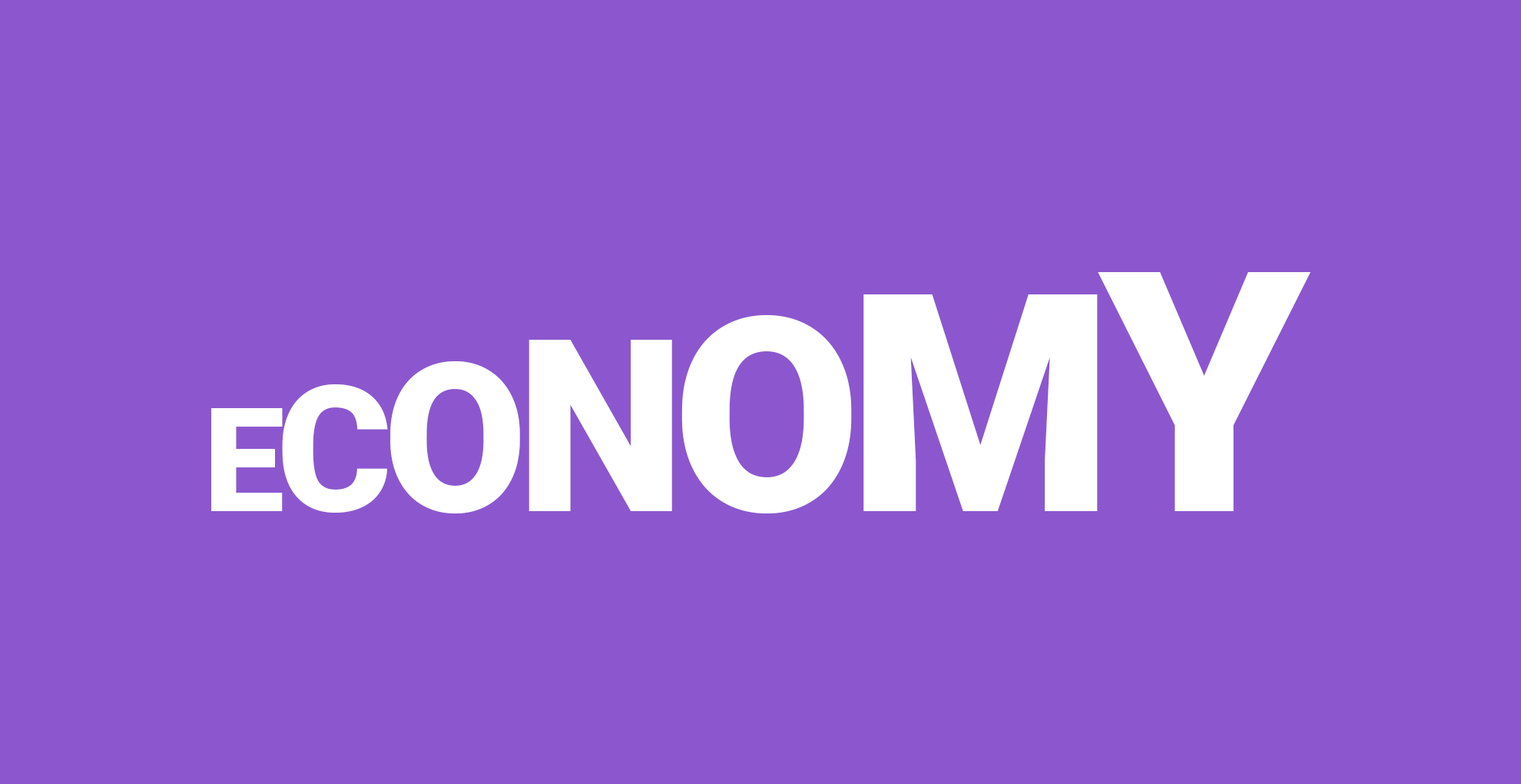
<style>
.page{position:relative;width:1521px;height:784px;background:#8c57ce}
.page>*{position:absolute;margin:0}
.t1{font:144.1px "Roboto-Black";letter-spacing:-0.05em;color:#ffffff}
.t2{font:176.1px "Roboto-Black";letter-spacing:-0.05em;color:#ffffff}
.t3{font:208.1px "Roboto-Black";letter-spacing:-0.05em;color:#ffffff}
.t4{font:240.1px "Roboto-Black";letter-spacing:-0.05em;color:#ffffff}
.t5{font:272.1px "Roboto-Black";letter-spacing:-0.05em;color:#ffffff}
.t6{font:304.2px "Roboto-Black";letter-spacing:-0.05em;color:#ffffff}
.t7{font:336.2px "Roboto-Black";letter-spacing:-0.05em;color:#ffffff}
</style>
<div class="page">
<p class="t1" style="left:211px;top:272px;width:1100px;height:241px">E<span class="t2">C</span><span class="t3">O</span><span class="t4">N</span><span class="t5">O</span><span class="t6">M</span><span class="t7">Y</span></p>
</div>
